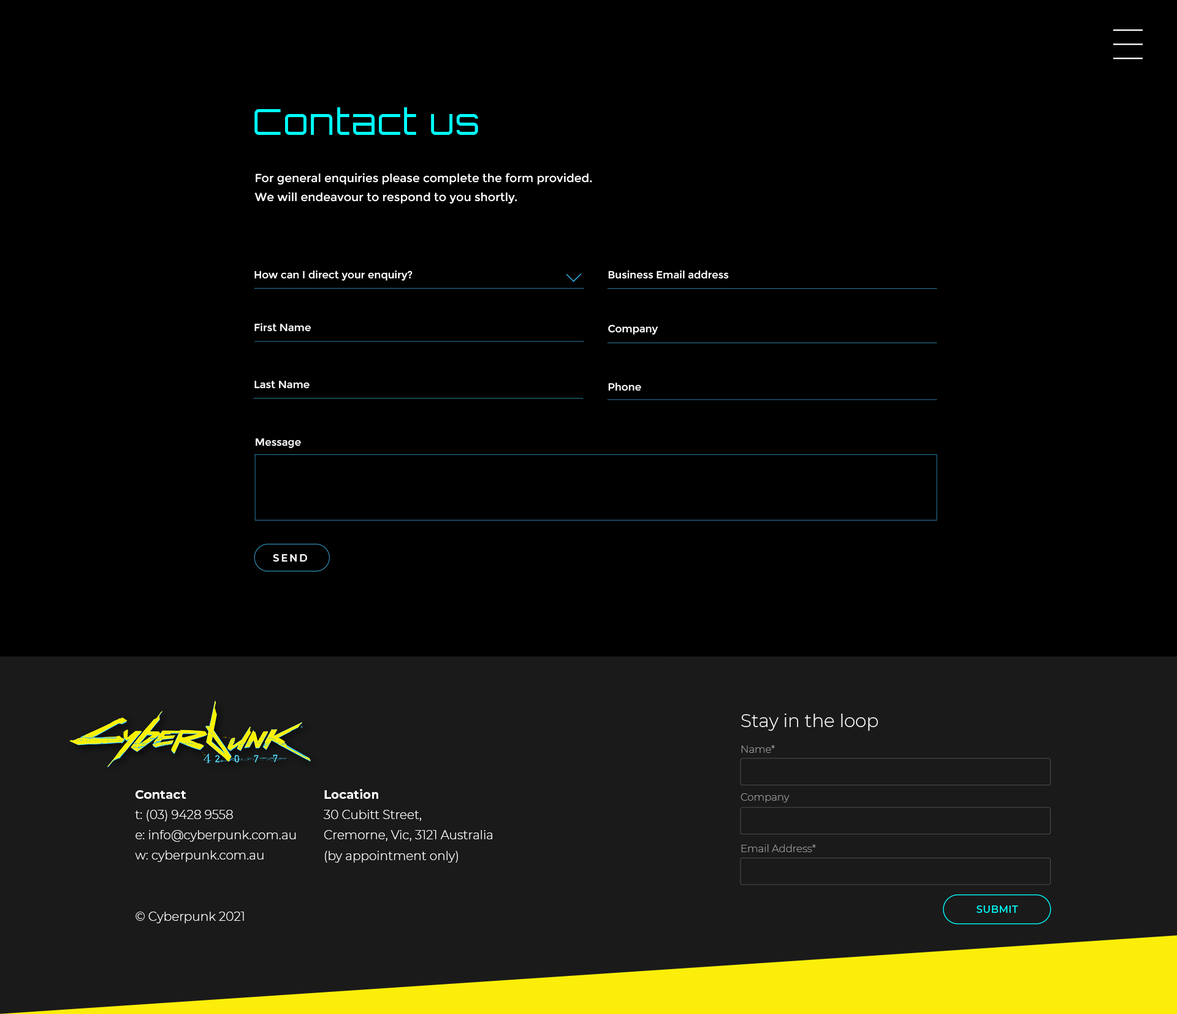
<style>
.page{position:relative;width:1177px;height:1014px;background:#000000}
.page>*{position:absolute;margin:0}
.t1{font:36.2px "Orbitron-Regular";letter-spacing:0.03em;color:#00ffff}
.t2{font:11.6px/19.2px "Montserrat-Regular";color:#ffffff}
.t3{font:10.3px "Montserrat-Regular";color:#ffffff}
.t4{font:9.8px "Montserrat-SemiBold";letter-spacing:0.19em;color:#ffffff}
.t5{font:18px "Montserrat-Light";color:#ffffff}
.t6{font:10.1px "Montserrat-Light";color:#999999}
.t7{font:12.3px/20.3px "Montserrat-Light";color:#ffffff}
.t8{font:12.3px/20.3px "Montserrat-Bold";color:#ffffff}
.t9{font:9.8px "Montserrat-Medium";letter-spacing:0.04em;color:#00ffff}
</style>
<div class="page">
<p class="t1" style="left:254px;top:107px;width:224px;height:28px">Contact us</p>
<p class="t2" style="left:254px;top:173px;width:338px;height:30px">For general enquiries please complete the form provided. <br>We will endeavour to respond to you shortly.</p>
<p class="t3" style="left:254px;top:270px;width:158px;height:11px">How can I direct your enquiry?</p>
<p class="t3" style="left:608px;top:270px;width:121px;height:9px">Business Email address</p>
<p class="t3" style="left:254px;top:323px;width:57px;height:9px">First Name</p>
<p class="t3" style="left:608px;top:324px;width:50px;height:11px">Company</p>
<p class="t3" style="left:254px;top:381px;width:55px;height:7px">Last Name</p>
<p class="t3" style="left:608px;top:382px;width:33px;height:9px">Phone</p>
<p class="t3" style="left:256px;top:438px;width:45px;height:10px">Message</p>
<p class="t4" style="left:273px;top:554px;width:34px;height:7px">SEND</p>
<p class="t5" style="left:741px;top:713px;width:136px;height:17px">Stay in the loop</p>
<p class="t6" style="left:741px;top:745px;width:34px;height:7px">Name*</p>
<p class="t7" style="left:135px;top:790px;width:161px;height:133px"><span class="t8">Contact<br></span>t: (03) 9428 9558<br>e: info@cyberpunk.com.au<br>w: cyberpunk.com.au<br><br><br>© Cyberpunk 2021</p>
<p class="t7" style="left:324px;top:789px;width:168px;height:73px"><span class="t8">Location<br></span>30 Cubitt Street,<br>Cremorne, Vic, 3121 Australia<br>(by appointment only)</p>
<p class="t6" style="left:740px;top:793px;width:49px;height:9px">Company</p>
<p class="t6" style="left:741px;top:844px;width:75px;height:8px">Email Address*</p>
<p class="t9" style="left:976px;top:905px;width:42px;height:7px">SUBMIT</p>
</div>
